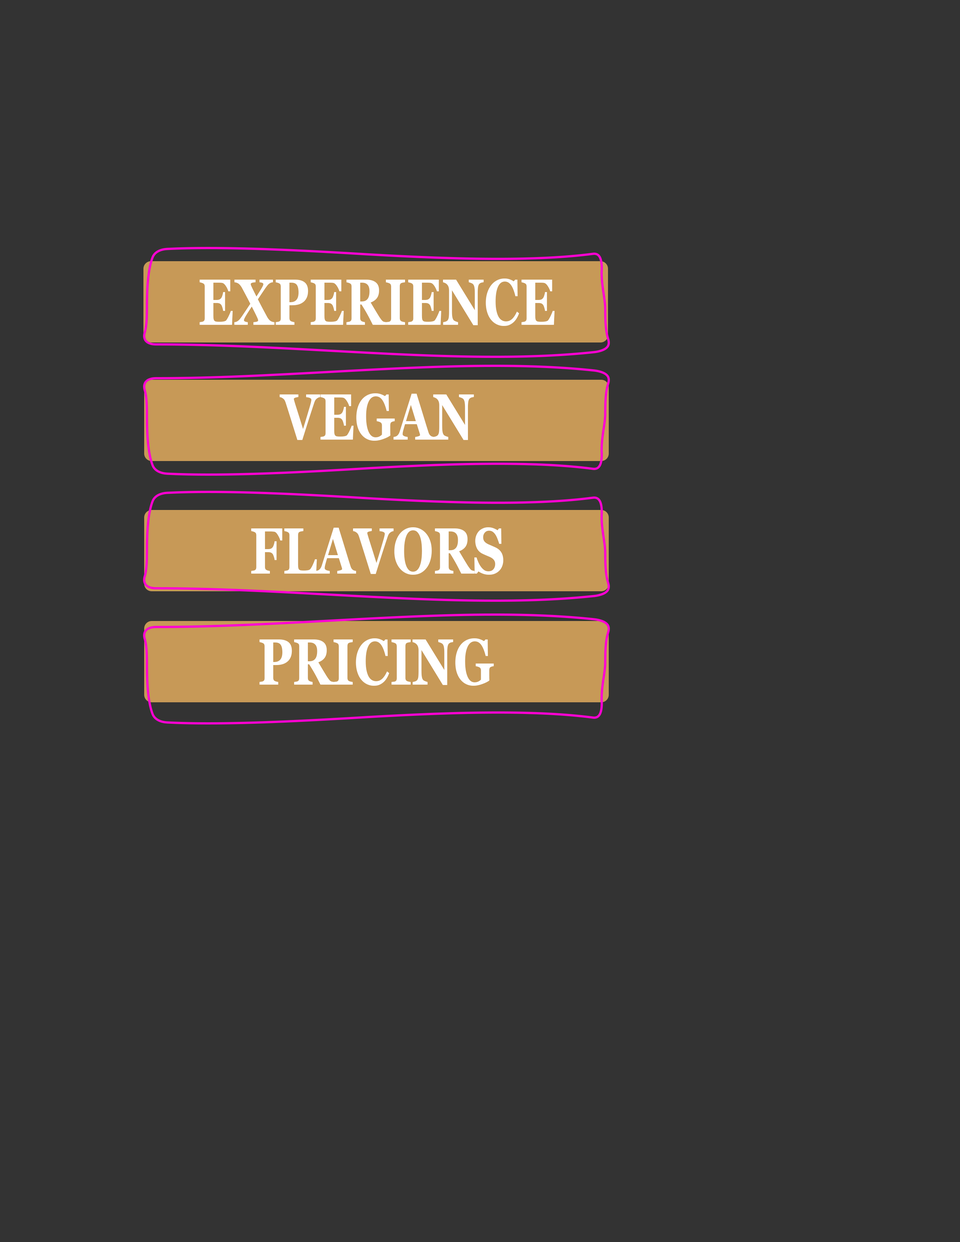
<style>
.page{position:relative;width:960px;height:1242px;background:#333333}
.page>*{position:absolute;margin:0}
.t1{font:64.9px "Georgia-Bold";color:#ffffff;scale:0.77 1}
.t2{font:64.9px "Georgia-Bold";color:#fffeff;scale:0.77 1}
</style>
<div class="page">
<p class="t1" style="left:200px;top:279px;width:354px;height:47px">EXPERIENCE</p>
<p class="t2" style="left:279px;top:393px;width:195px;height:48px">VEGAN</p>
<p class="t1" style="left:251px;top:527px;width:252px;height:48px">FLAVORS</p>
<p class="t1" style="left:259px;top:638px;width:235px;height:48px">PRICING</p>
</div>
